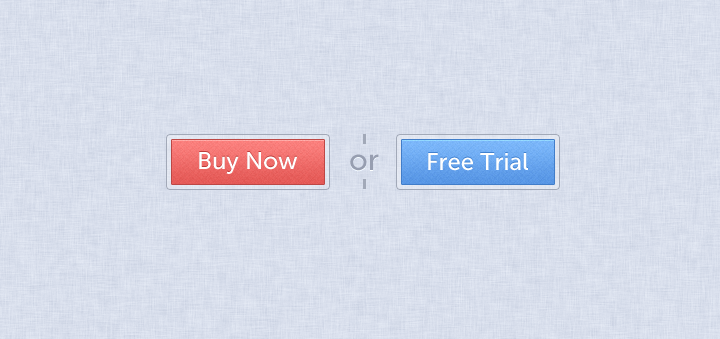
<style>
.page{position:relative;width:720px;height:339px}
.page>*{position:absolute;margin:0}
.t1{font:24px "MuseoSans-500";color:#ffffff}
.t2{font:30px "MuseoSans-500";color:#979eb0}
</style>
<div class="page">
<p class="t1" style="left:199px;top:152px;width:99px;height:22px">Buy Now</p>
<p class="t2" style="left:350px;top:154px;width:29px;height:17px">or</p>
<p class="t1" style="left:428px;top:153px;width:100px;height:18px">Free Trial</p>
</div>
